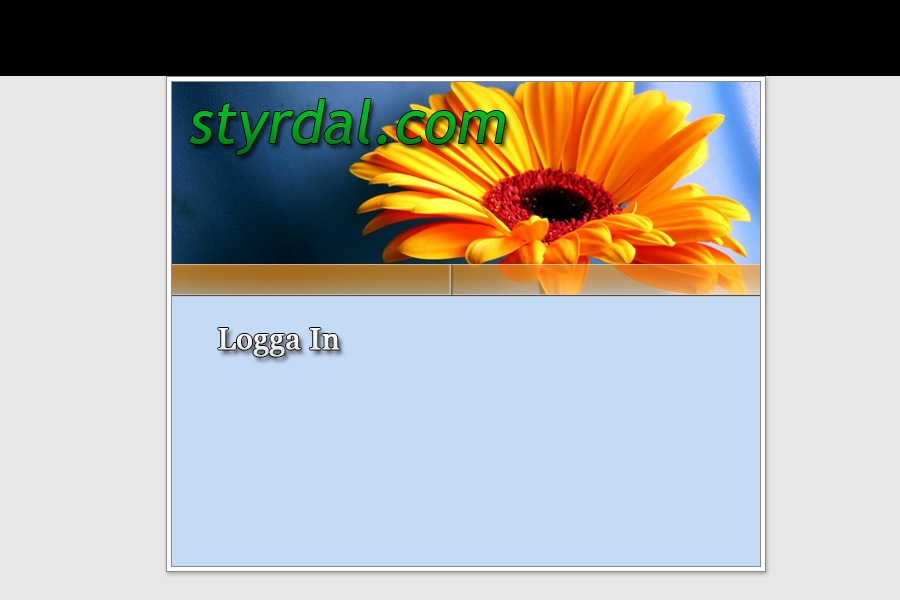
<style>
.page{position:relative;width:900px;height:600px;background:#e7e7e7}
.page>*{position:absolute;margin:0}
.t1{font:60px "TrebuchetMS";color:#01a81e;font-style:italic}
.t2{font:30px "Georgia";color:#ffffff;font-weight:bold}
</style>
<div class="page">
<p class="t1" style="left:189px;top:99px;width:316px;height:56px">styrdal.com</p>
<p class="t2" style="left:218px;top:328px;width:122px;height:29px">Logga In</p>
</div>
